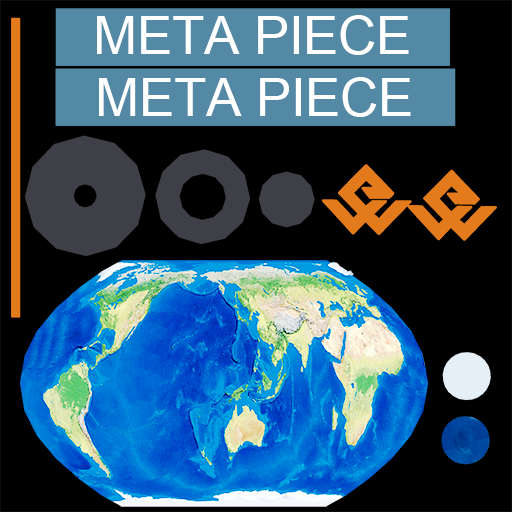
<style>
.page{position:relative;width:512px;height:512px;background:#000000}
.page>*{position:absolute;margin:0}
.t1{font:52.5px "ArialMT";color:#ffffff}
</style>
<div class="page">
<p class="t1" style="left:97px;top:15px;width:312px;height:40px">META PIECE</p>
<p class="t1" style="left:99px;top:77px;width:312px;height:40px">META PIECE</p>
</div>
